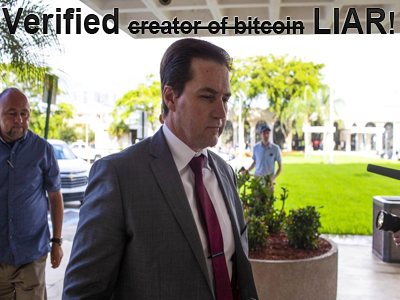
<style>
.page{position:relative;width:400px;height:300px}
.page>*{position:absolute;margin:0}
.t1{font:24px "Arial-BoldMT";color:#0c0c0c;scale:0.9 1}
.t2{font:36px "Arial-BoldMT";color:#0c0c0c;scale:0.9 1}
.t3{font:30px "Arial-BoldMT";color:#0c0c0c;scale:0.9 1}
</style>
<div class="page">
<p class="t1" style="left:2px;top:8px;width:392px;height:26px"><span class="t2">Verified </span>creator of bitcoin <span class="t2">LIAR</span><span class="t3">!</span></p>
</div>
